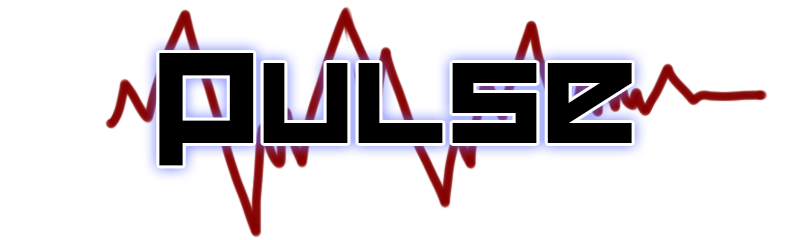
<style>
.page{position:relative;width:800px;height:240px;background:#ffffff}
.page>*{position:absolute;margin:0}
.t1{font:100px "HappyKiller";color:#000000;scale:1.05 1}
</style>
<div class="page">
<p class="t1" style="left:159px;top:53px;width:473px;height:113px">Pulse</p>
</div>
